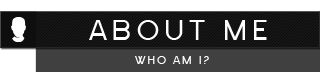
<style>
.page{position:relative;width:320px;height:83px;background:#ffffff}
.page>*{position:absolute;margin:0}
.t1{font:30px "SFOldRepublic";letter-spacing:0.14em;color:#ffffff}
.t2{font:12px "SFOldRepublic";letter-spacing:0.14em;color:#ffffff}
</style>
<div class="page">
<p class="t1" style="left:89px;top:20px;width:178px;height:20px">ABOUT ME</p>
<p class="t2" style="left:134px;top:56px;width:75px;height:8px">WHO AM I?</p>
</div>
